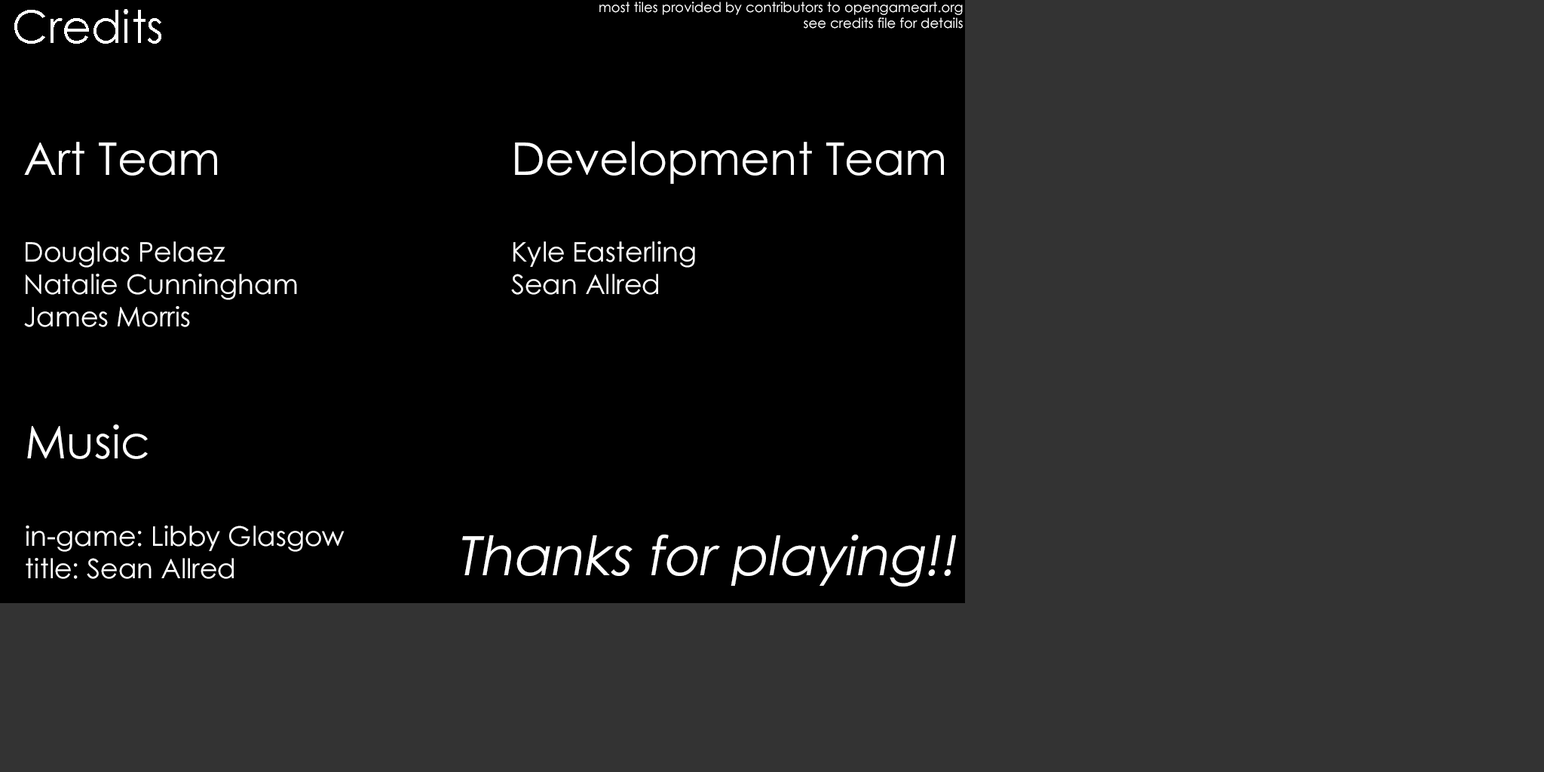
<style>
.page{position:relative;width:1544px;height:772px;background:#333333}
.page>*{position:absolute;margin:0}
.t1{font:13.6px "CenturyGothic";color:#ffffff}
.t2{font:45.2px "CenturyGothic";color:#ffffff}
.t3{font:27.1px "CenturyGothic";color:#ffffff}
.t4{font:54.3px "CenturyGothic";color:#ffffff;font-style:italic}
</style>
<div class="page">
<p class="t1" style="left:599px;top:2px;width:364px;height:27px;text-align:right">most tiles provided by contributors to opengameart.org<br>see credits file for details</p>
<p class="t2" style="left:14px;top:9px;width:147px;height:35px">Credits</p>
<p class="t3" style="left:24px;top:142px;width:273px;height:185px"><span class="t2">Art Team<br><br></span>Douglas Pelaez<br>Natalie Cunningham<br>James Morris</p>
<p class="t3" style="left:511px;top:141px;width:433px;height:154px"><span class="t2">Development Team<br><br></span>Kyle Easterling<br>Sean Allred</p>
<p class="t3" style="left:26px;top:425px;width:319px;height:154px"><span class="t2">Music<br><br></span>in-game: Libby Glasgow<br>title: Sean Allred</p>
<p class="t4" style="left:462px;top:535px;width:494px;height:52px">Thanks for playing!!</p>
</div>
